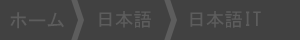
<style>
.page{position:relative;width:300px;height:40px;background:#414141}
.page>*{position:absolute;margin:0}
.t1{font:18.7px "MS-Gothic";color:#5d5d5d}
</style>
<div class="page">
<p class="t1" style="left:10px;top:12px;width:54px;height:17px">ホーム</p>
<p class="t1" style="left:99px;top:11px;width:52px;height:17px">日本語</p>
<p class="t1" style="left:190px;top:11px;width:71px;height:17px">日本語IT</p>
</div>
